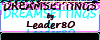
<style>
.page{position:relative;width:100px;height:40px;background:#ffffff}
.page>*{position:absolute;margin:0}
.t1{font:12px "SegoePrint-Bold";color:#16ffff;scale:0.85 1}
.t2{font:10px/10px "SegoePrint-Bold";color:#010102}
.t3{font:6px/10px "SegoePrint-Bold";color:#010102}
</style>
<div class="page">
<p class="t1" style="left:3px;top:9px;width:94px;height:10px">DREAMSETTINGS</p>
<p class="t2" style="left:26px;top:20px;width:49px;height:17px;text-align:center"><span class="t3">by<br></span>Leader80</p>
</div>
